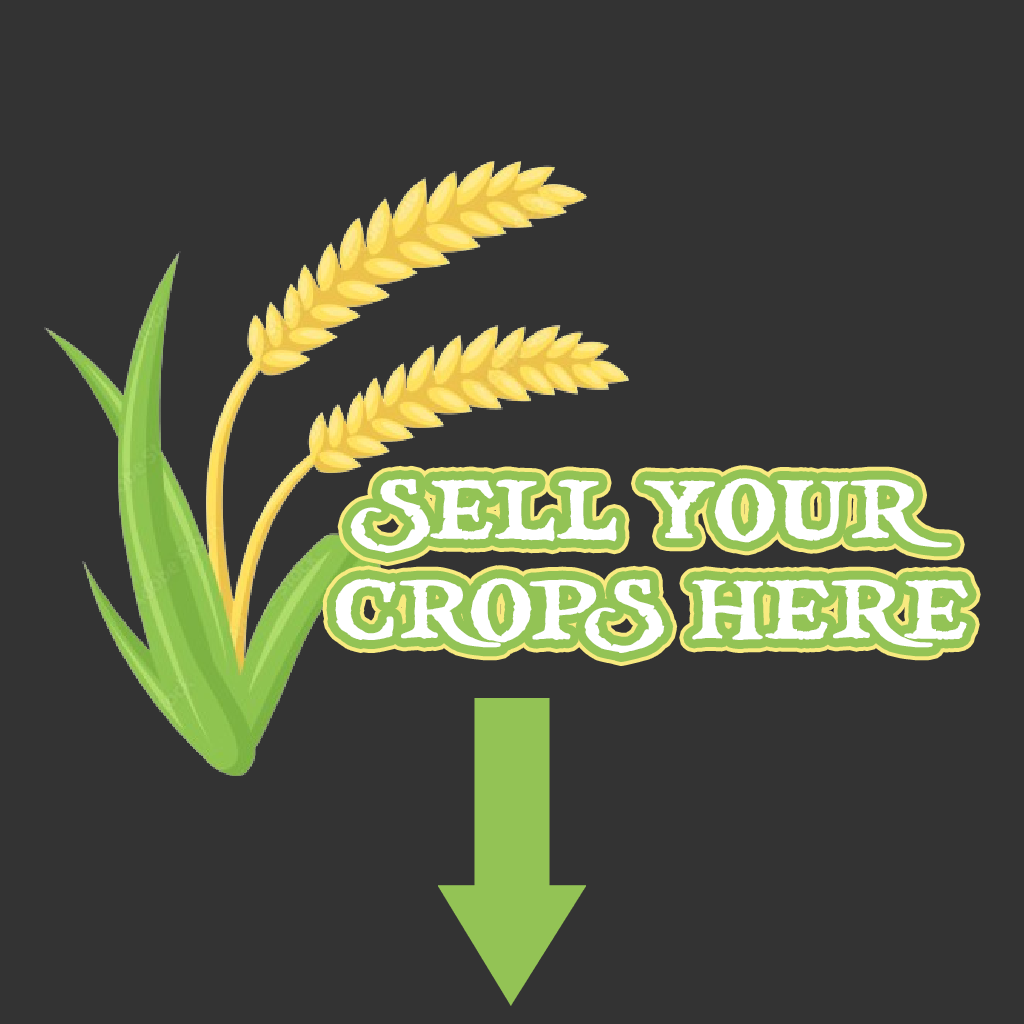
<style>
.page{position:relative;width:1024px;height:1024px;background:#333333}
.page>*{position:absolute;margin:0}
.t1{font:83.4px "treasuremap";color:#ffffff}
</style>
<div class="page">
<p class="t1" style="left:335px;top:478px;width:633px;height:175px;text-align:center">SELL YOUR <br>CROPS HERE</p>
</div>
